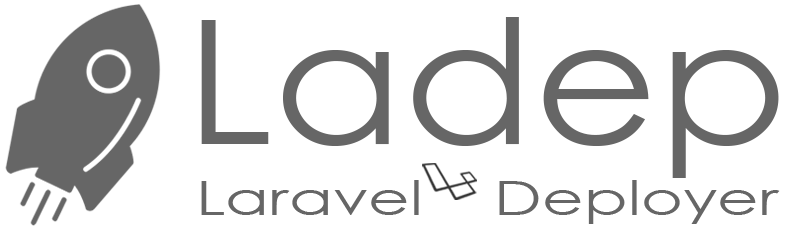
<style>
.page{position:relative;width:800px;height:230px;background:#ffffff}
.page>*{position:absolute;margin:0}
.t1{font:172.7px "CenturyGothic";color:#666666;scale:1.1 1}
.t2{font:47.2px "CenturyGothic";color:#666666;scale:1.36 1}
</style>
<div class="page">
<p class="t1" style="left:201px;top:17px;width:578px;height:161px">Ladep</p>
<p class="t2" style="left:201px;top:180px;width:579px;height:44px">Laravel    Deployer</p>
</div>
